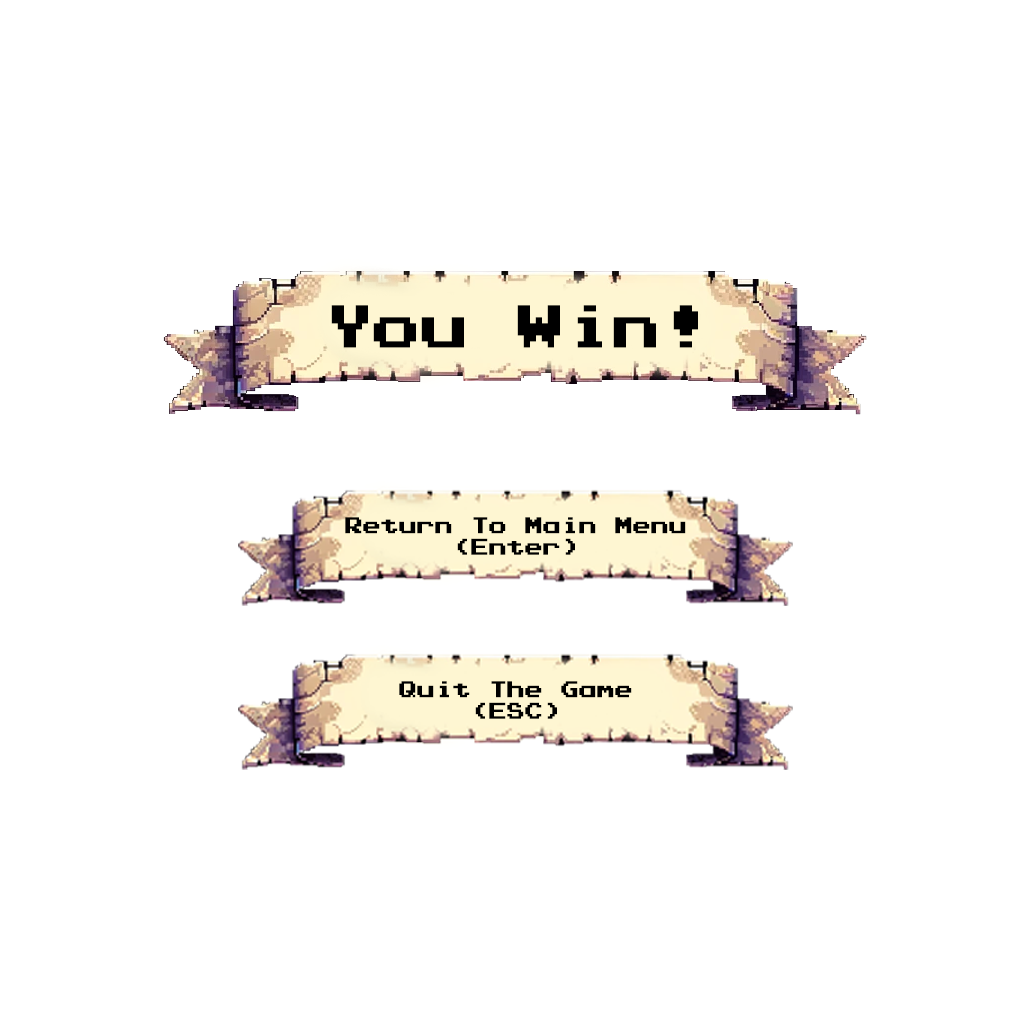
<style>
.page{position:relative;width:1024px;height:1024px;background:#ffffff}
.page>*{position:absolute;margin:0}
.t1{font:48px "PressStartK";color:#000000}
.t2{font:18px "PressStartK";color:#000000}
</style>
<div class="page">
<p class="t1" style="left:331px;top:305px;width:367px;height:43px">You Win!</p>
<p class="t2" style="left:345px;top:517px;width:341px;height:38px;text-align:center">Return To Main Menu<br>(Enter)</p>
<p class="t2" style="left:399px;top:681px;width:233px;height:38px;text-align:center">Quit The Game<br>(ESC)</p>
</div>
